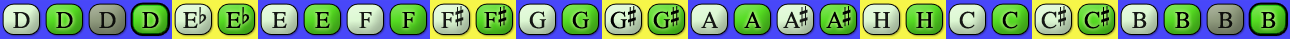
<style>
.page{position:relative;width:1290px;height:39px}
.page>*{position:absolute;margin:0}
.t1{font:24px "OpusChords";color:#000000}
.t2{font:24px "OpusChords";letter-spacing:-0.025em;color:#000000}
.t3{font:24px "OpusChords";letter-spacing:-0.1em;color:#000000}
</style>
<div class="page">
<p class="t1" style="left:441px;top:6px;width:23px;height:22px;opacity:0.9">F#</p>
<p class="t1" style="left:484px;top:6px;width:23px;height:22px">F#</p>
<p class="t2" style="left:610px;top:6px;width:26px;height:23px">G#</p>
<p class="t2" style="left:653px;top:6px;width:26px;height:23px">G#</p>
<p class="t3" style="left:783px;top:6px;width:25px;height:22px;opacity:0.9">A#</p>
<p class="t3" style="left:826px;top:6px;width:25px;height:22px">A#</p>
<p class="t1" style="left:1041px;top:6px;width:25px;height:23px;opacity:0.9">C#</p>
<p class="t1" style="left:1084px;top:6px;width:25px;height:23px">C#</p>
<p class="t1" style="left:13px;top:12px;width:17px;height:16px;opacity:0.9">D</p>
<p class="t1" style="left:56px;top:12px;width:17px;height:16px">D</p>
<p class="t1" style="left:99px;top:12px;width:17px;height:16px;opacity:0.9">D</p>
<p class="t1" style="left:142px;top:12px;width:17px;height:16px">D</p>
<p class="t1" style="left:183px;top:7px;width:24px;height:21px;opacity:0.9">Eb</p>
<p class="t1" style="left:226px;top:7px;width:24px;height:21px">Eb</p>
<p class="t1" style="left:272px;top:12px;width:15px;height:16px;opacity:0.9">E</p>
<p class="t1" style="left:315px;top:12px;width:15px;height:16px">E</p>
<p class="t1" style="left:359px;top:12px;width:13px;height:16px;opacity:0.9">F</p>
<p class="t1" style="left:402px;top:12px;width:13px;height:16px">F</p>
<p class="t1" style="left:529px;top:11px;width:17px;height:18px;opacity:0.9">G</p>
<p class="t1" style="left:572px;top:11px;width:17px;height:18px">G</p>
<p class="t1" style="left:701px;top:11px;width:17px;height:17px;opacity:0.9">A</p>
<p class="t1" style="left:744px;top:11px;width:17px;height:17px">A</p>
<p class="t1" style="left:873px;top:12px;width:17px;height:16px;opacity:0.9">H</p>
<p class="t1" style="left:916px;top:12px;width:17px;height:16px">H</p>
<p class="t1" style="left:959px;top:11px;width:16px;height:18px;opacity:0.9">C</p>
<p class="t1" style="left:1002px;top:11px;width:16px;height:18px">C</p>
<p class="t1" style="left:1132px;top:12px;width:15px;height:16px;opacity:0.9">B</p>
<p class="t1" style="left:1175px;top:12px;width:15px;height:16px">B</p>
<p class="t1" style="left:1218px;top:12px;width:15px;height:16px;opacity:0.9">B</p>
<p class="t1" style="left:1261px;top:12px;width:15px;height:16px">B</p>
</div>
